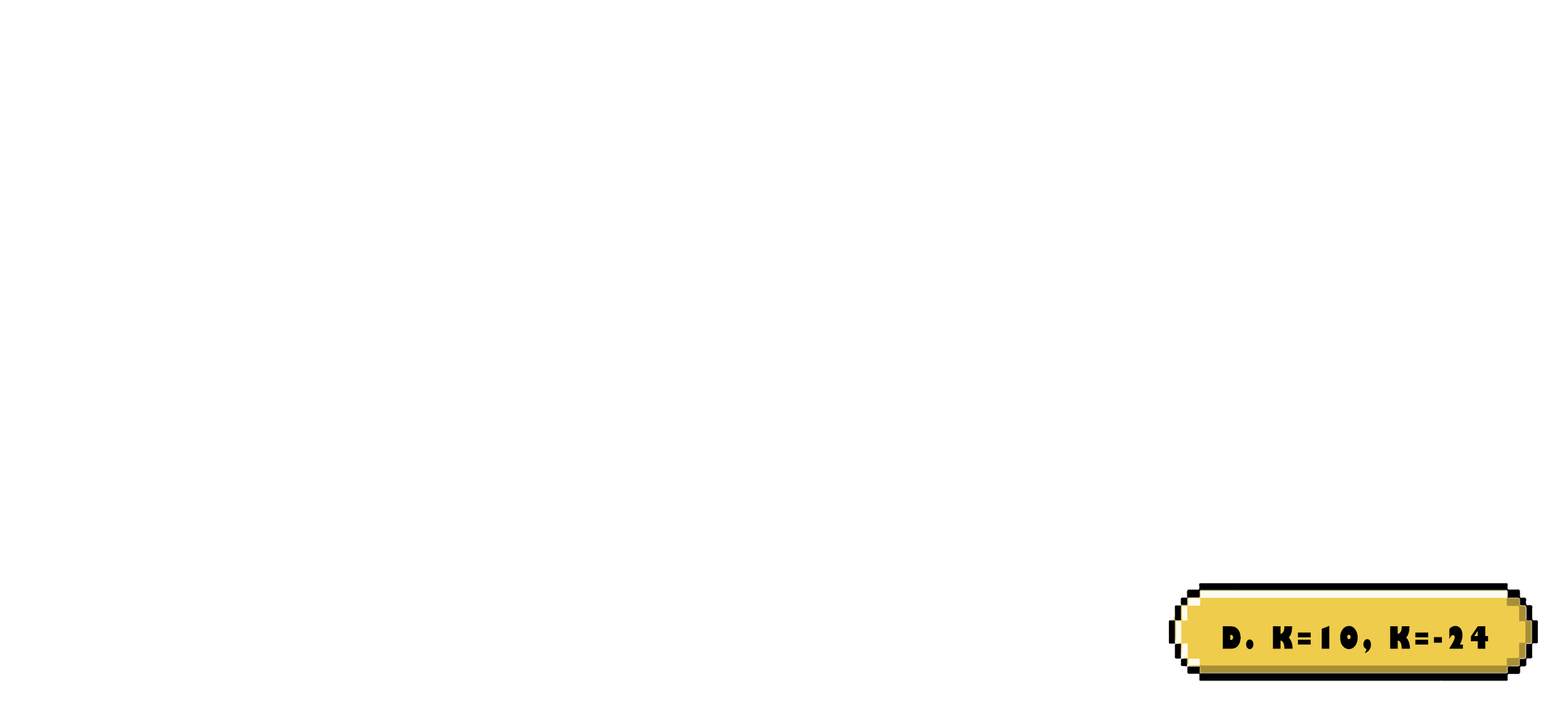
<style>
.page{position:relative;width:1568px;height:706px;background:#ffffff}
.page>*{position:absolute;margin:0}
.t1{font:29.9px "GillSans-UltraBoldCondensed";letter-spacing:0.115em;color:#000000;text-transform:uppercase;scale:1.12 1}
</style>
<div class="page">
<p class="t1" style="left:1222px;top:625px;width:266px;height:28px">d. k=10, k=-24</p>
</div>
